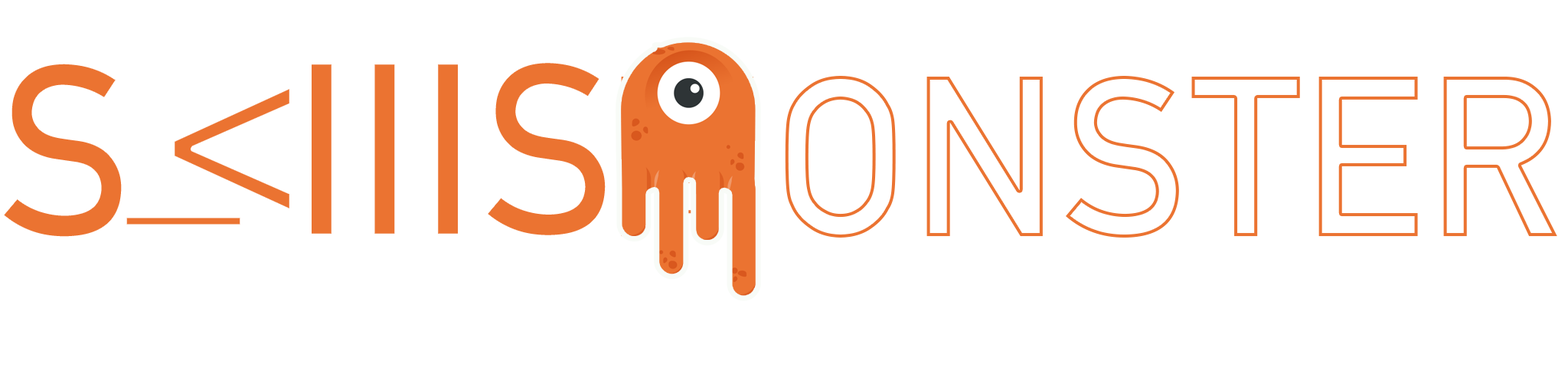
<style>
.page{position:relative;width:1568px;height:374px;background:#ffffff}
.page>*{position:absolute;margin:0}
.t1{font:245.6px "DINAlternate-Bold";color:#ff6d30}
.t2{font:223.3px "DINAlternate-Bold"}
.t3{font:245.6px "DINAlternate-Bold"}
</style>
<div class="page">
<p class="t1" style="left:0px;top:60px;width:125px;height:180px">S</p>
<p class="t1" style="left:309px;top:60px;width:300px;height:178px">IIIS</p>
<p class="t2" style="left:621px;top:76px;width:936px;height:161px">MONSTER</p>
<p class="t1" style="left:172px;top:84px;width:120px;height:129px;rotate:180deg">&gt;</p>
<p class="t3" style="left:123px;top:214px;width:120px;height:13px">_</p>
</div>
